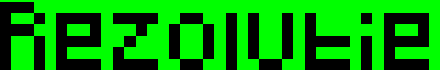
<style>
.page{position:relative;width:440px;height:70px;background:#00ff00}
.page>*{position:absolute;margin:0}
.t1{font:57px "Pixeled";color:#000000}
</style>
<div class="page">
<p class="t1" style="left:0px;top:2px;width:429px;height:68px">Rezolutie</p>
</div>
